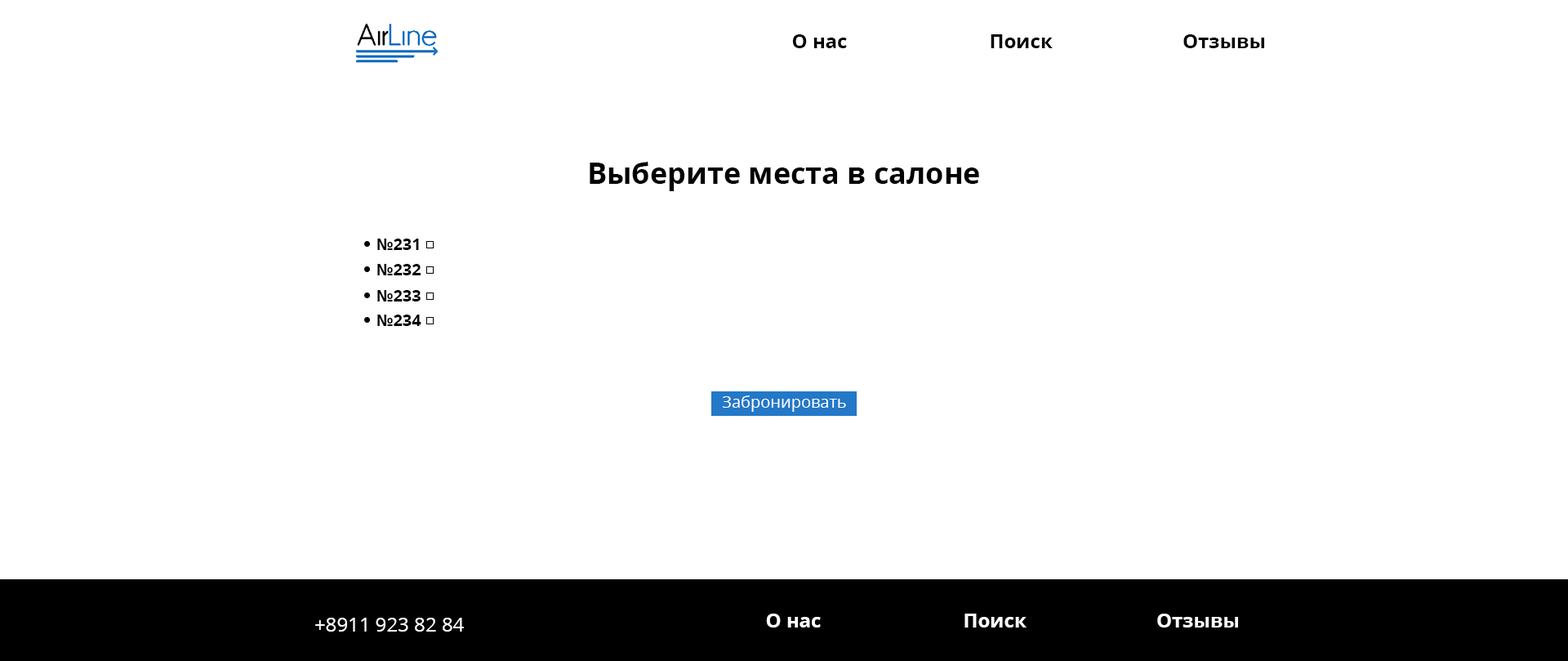
<style>
.page{position:relative;width:1568px;height:661px;background:#ffffff}
.page>*{position:absolute;margin:0}
.t1{font:19.6px "OpenSans-Bold";color:#000000}
.t2{font:29.4px "OpenSans-Bold";color:#000000}
.t3{font:16.3px "OpenSans-Bold";color:#000000}
.t4{font:16.3px "OpenSans-Regular";color:#ffffff}
.t5{font:19.6px "OpenSans-Regular";color:#ffffff}
.t6{font:19.6px "OpenSans-Bold";color:#ffffff}
</style>
<div class="page">
<p class="t1" style="left:792px;top:34px;width:55px;height:14px">О нас</p>
<p class="t1" style="left:991px;top:34px;width:62px;height:14px">Поиск</p>
<p class="t1" style="left:1183px;top:34px;width:81px;height:14px">Отзывы</p>
<p class="t2" style="left:590px;top:162px;width:389px;height:29px">Выберите места в салоне</p>
<p class="t3" style="left:377px;top:238px;width:42px;height:12px">№231</p>
<p class="t3" style="left:377px;top:264px;width:44px;height:11px">№232</p>
<p class="t3" style="left:377px;top:290px;width:44px;height:11px">№233</p>
<p class="t3" style="left:377px;top:314px;width:44px;height:12px">№234</p>
<p class="t4" style="left:722px;top:395px;width:124px;height:17px">Забронировать</p>
<p class="t5" style="left:315px;top:617px;width:149px;height:14px">+8911 923 82 84</p>
<p class="t6" style="left:766px;top:613px;width:55px;height:14px">О нас</p>
<p class="t6" style="left:964px;top:613px;width:63px;height:14px">Поиск</p>
<p class="t6" style="left:1157px;top:613px;width:81px;height:14px">Отзывы</p>
</div>
